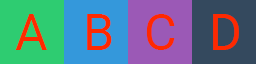
<style>
.page{position:relative;width:256px;height:64px;background:#9b59b6}
.page>*{position:absolute;margin:0}
.t1{font:50px "Roboto-Regular";color:#ff2900}
</style>
<div class="page">
<p class="t1" style="left:15px;top:14px;width:32px;height:36px">A</p>
<p class="t1" style="left:87px;top:14px;width:25px;height:36px">B</p>
<p class="t1" style="left:146px;top:14px;width:29px;height:36px">C</p>
<p class="t1" style="left:213px;top:14px;width:26px;height:36px">D</p>
</div>
